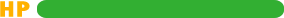
<style>
.page{position:relative;width:284px;height:18px;background:#32af32}
.page>*{position:absolute;margin:0}
.t1{font:23.3px "TwCenMT-CondensedExtraBold";color:#ffb100;scale:1.29 1}
</style>
<div class="page">
<p class="t1" style="left:0px;top:1px;width:30px;height:16px">HP</p>
</div>
